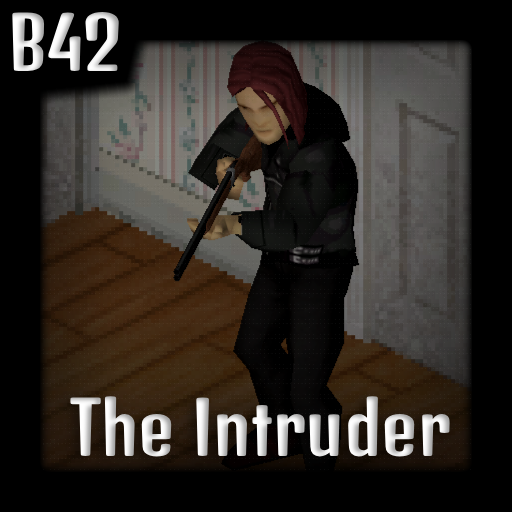
<style>
.page{position:relative;width:512px;height:512px;background:#000000}
.page>*{position:absolute;margin:0}
.t1{font:71px "DenkOne-Regular"}
</style>
<div class="page">
<p class="t1" style="left:12px;top:12px;width:107px;height:59px">B42</p>
<p class="t1" style="left:70px;top:396px;width:380px;height:61px">The Intruder</p>
</div>
